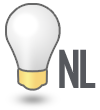
<style>
.page{position:relative;width:100px;height:110px;background:#ffffff}
.page>*{position:absolute;margin:0}
.t1{font:50px "AgencyFB-Bold";letter-spacing:-0.05em;color:#56585d}
</style>
<div class="page">
<p class="t1" style="left:59px;top:49px;width:37px;height:39px">NL</p>
</div>
